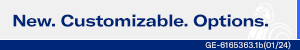
<style>
.page{position:relative;width:300px;height:50px;background:#f0f0f0}
.page>*{position:absolute;margin:0}
.t1{font:16.5px "GTAmerica-ExtBd";letter-spacing:-0.015em;color:#002677}
.t2{font:8.3px "GTAmerica-Rg";letter-spacing:0.025em;color:#ffffff}
</style>
<div class="page">
<p class="t1" style="left:13px;top:14px;width:255px;height:16px">New. Customizable. Options.</p>
<p class="t2" style="left:205px;top:41px;width:86px;height:9px">GE-6165363.1b(01/24)</p>
</div>
